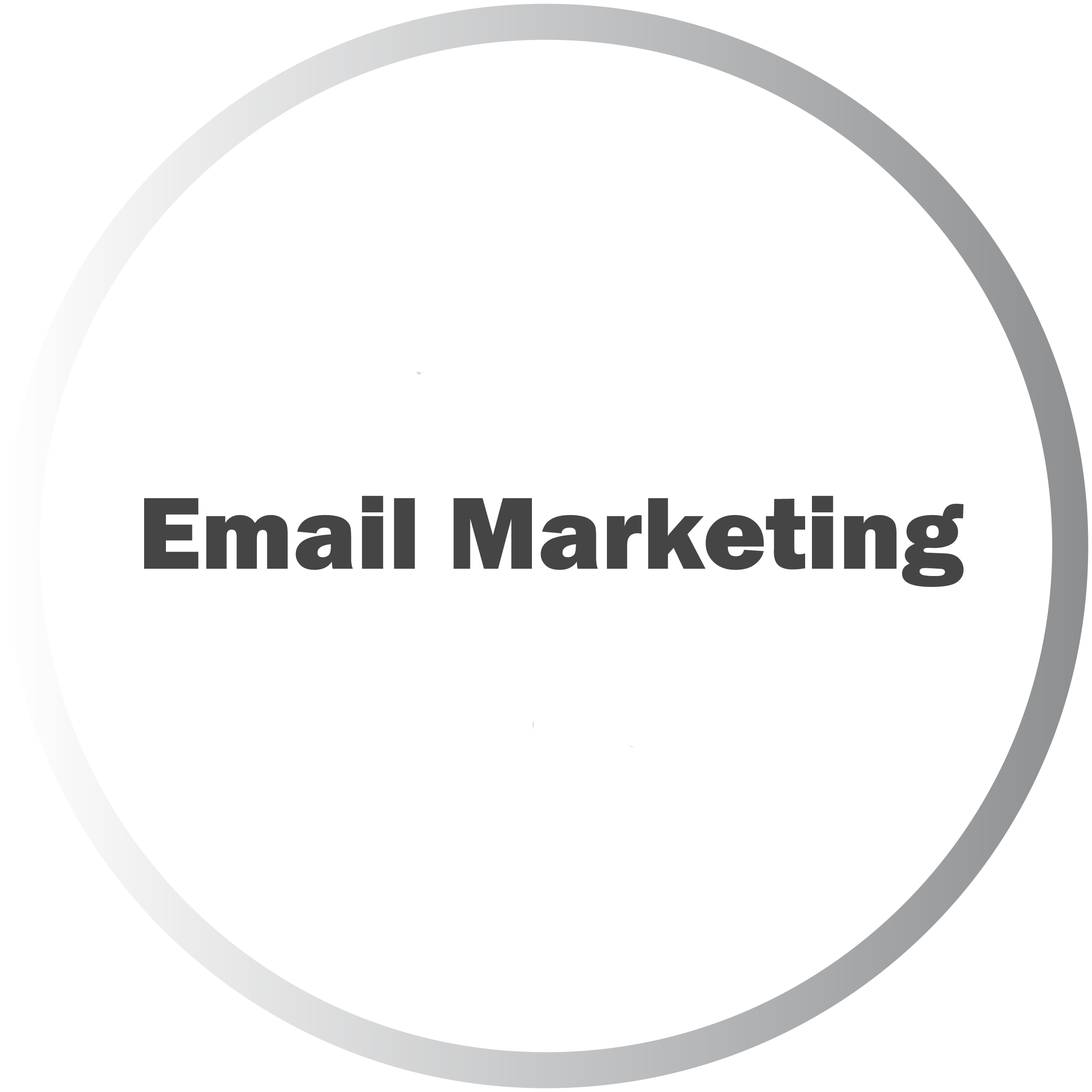
<style>
.page{position:relative;width:1092px;height:1092px;background:#ffffff}
.page>*{position:absolute;margin:0}
.t1{font:105.8px "FranklinGothic-Heavy";color:#454545}
</style>
<div class="page">
<p class="t1" style="left:144px;top:496px;width:820px;height:91px">Email Marketing</p>
</div>
